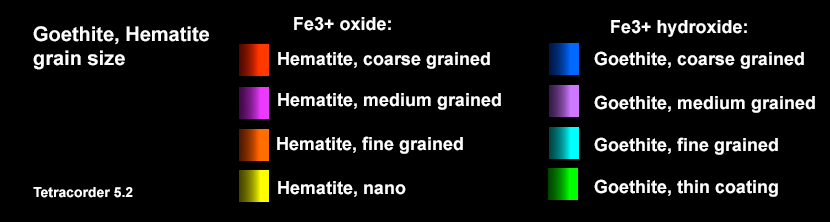
<style>
.page{position:relative;width:830px;height:222px;background:#000000}
.page>*{position:absolute;margin:0}
.t1{font:18px "Arial-BoldMT";color:#fffefe}
.t2{font:20px "Arial-BoldMT";color:#fffefe}
.t3{font:14px "Arial-BoldMT";color:#fffefe}
</style>
<div class="page">
<p class="t1" style="left:294px;top:17px;width:97px;height:14px">Fe3+ oxide:</p>
<p class="t2" style="left:33px;top:26px;width:176px;height:44px">Goethite, Hematite<br>grain size</p>
<p class="t1" style="left:611px;top:20px;width:136px;height:17px">Fe3+ hydroxide:</p>
<p class="t1" style="left:278px;top:52px;width:212px;height:17px">Hematite, coarse grained</p>
<p class="t1" style="left:594px;top:51px;width:210px;height:18px">Goethite, coarse grained</p>
<p class="t1" style="left:278px;top:93px;width:223px;height:17px">Hematite, medium grained</p>
<p class="t1" style="left:594px;top:95px;width:221px;height:18px">Goethite, medium grained</p>
<p class="t1" style="left:277px;top:136px;width:186px;height:18px">Hematite, fine grained</p>
<p class="t1" style="left:594px;top:137px;width:184px;height:18px">Goethite, fine grained</p>
<p class="t1" style="left:278px;top:181px;width:128px;height:16px">Hematite, nano</p>
<p class="t1" style="left:594px;top:179px;width:184px;height:18px">Goethite, thin coating</p>
<p class="t3" style="left:33px;top:187px;width:100px;height:11px">Tetracorder 5.2</p>
</div>
